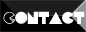
<style>
.page{position:relative;width:86px;height:32px;background:#000000}
.page>*{position:absolute;margin:0}
.t1{font:12px "PacFont";color:#ffffff}
</style>
<div class="page">
<p class="t1" style="left:3px;top:11px;width:82px;height:13px">Contact</p>
</div>
